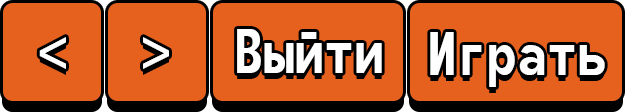
<style>
.page{position:relative;width:629px;height:112px;background:#e6611d}
.page>*{position:absolute;margin:0}
.t1{font:75px "Monofonto";color:#fdfefd}
</style>
<div class="page">
<p class="t1" style="left:237px;top:29px;width:145px;height:44px">Выйти</p>
<p class="t1" style="left:39px;top:37px;width:27px;height:32px">&lt;</p>
<p class="t1" style="left:143px;top:37px;width:26px;height:32px">&gt;</p>
<p class="t1" style="left:430px;top:32px;width:175px;height:55px">Играть</p>
</div>
